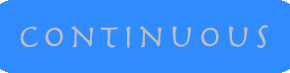
<style>
.page{position:relative;width:290px;height:73px;background:#308bfc}
.page>*{position:absolute;margin:0}
.t1{font:34.4px "Herculanum";letter-spacing:0.065em;color:#bdbdbd;scale:1.12 1}
</style>
<div class="page">
<p class="t1" style="left:20px;top:25px;width:248px;height:23px">continuous</p>
</div>
